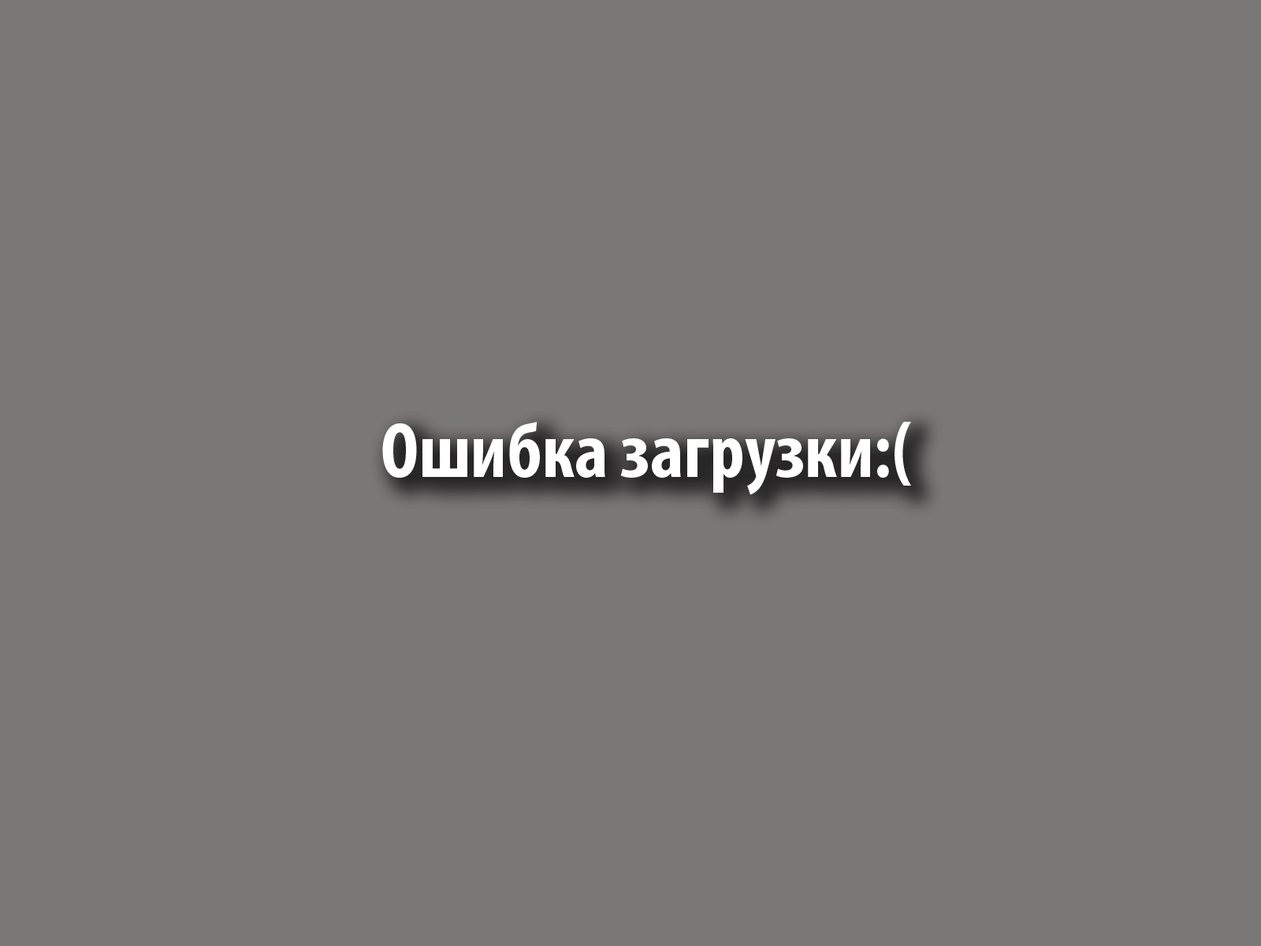
<style>
.page{position:relative;width:1261px;height:946px;background:#7a7777}
.page>*{position:absolute;margin:0}
.t1{font:78.8px "MyriadPro-BoldCond";color:#ffffff}
</style>
<div class="page">
<p class="t1" style="left:382px;top:422px;width:529px;height:73px">Ошибка загрузки:(</p>
</div>
